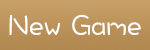
<style>
.page{position:relative;width:150px;height:50px}
.page>*{position:absolute;margin:0}
.t1{font:30px "DFWaWaSC-W5";color:#ffffff}
</style>
<div class="page">
<p class="t1" style="left:9px;top:14px;width:132px;height:21px">New Game</p>
</div>
